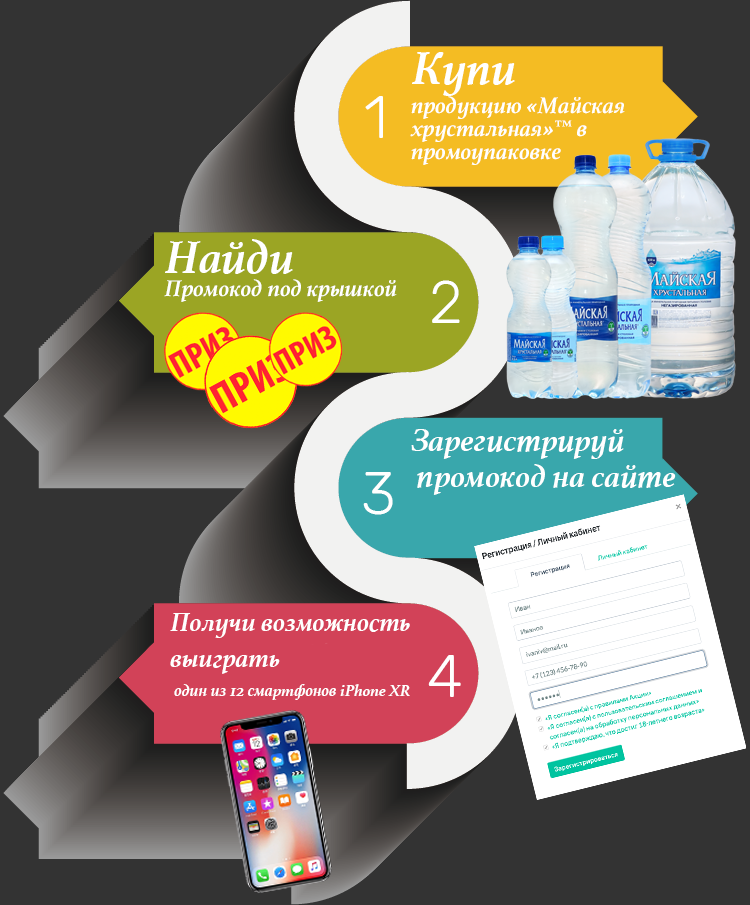
<style>
.page{position:relative;width:750px;height:905px;background:#333333}
.page>*{position:absolute;margin:0}
.t1{font:48px "Athelas-BoldItalic";color:#ffffff}
.t2{font:60px "Rubik-Light";color:#ffffff}
.t3{font:24px/23px "Athelas-BoldItalic";color:#ffffff}
.t4{font:24px "Athelas-BoldItalic";color:#ffffff}
.t5{font:33px/36px "Athelas-BoldItalic";color:#ffffff}
.t6{font:27px/36px "Athelas-BoldItalic";color:#ffffff}
.t7{font:17px "Athelas-BoldItalic";color:#ffffff}
</style>
<div class="page">
<p class="t1" style="left:412px;top:52px;width:103px;height:44px">Купи</p>
<p class="t2" style="left:365px;top:96px;width:18px;height:42px">1</p>
<p class="t3" style="left:410px;top:96px;width:215px;height:69px">продукцию «Майская хрустальная»™ в промоупаковке</p>
<p class="t1" style="left:165px;top:239px;width:128px;height:35px">Найди</p>
<p class="t4" style="left:164px;top:279px;width:233px;height:23px">Промокод под крышкой</p>
<p class="t2" style="left:432px;top:280px;width:28px;height:43px">2</p>
<p class="t5" style="left:411px;top:429px;width:265px;height:66px">Зарегистрируй<br> промокод на сайте</p>
<p class="t2" style="left:363px;top:472px;width:30px;height:43px">3</p>
<p class="t6" style="left:170px;top:613px;width:240px;height:61px">Получи возможность выиграть</p>
<p class="t2" style="left:428px;top:655px;width:33px;height:42px">4</p>
<p class="t7" style="left:174px;top:684px;width:236px;height:16px">один из 12 смартфонов iPhone XR</p>
</div>
